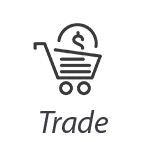
<style>
.page{position:relative;width:142px;height:142px;background:#ffffff}
.page>*{position:absolute;margin:0}
.t1{font:32px "MyriadPro-It";color:#3b3b44}
</style>
<div class="page">
<p class="t1" style="left:40px;top:110px;width:68px;height:23px">Trade</p>
</div>
